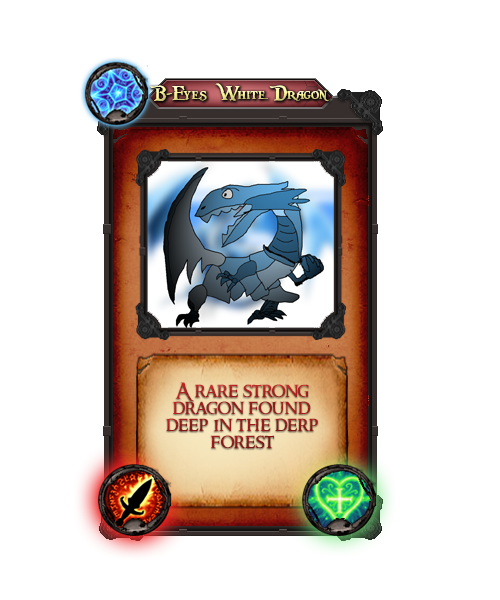
<style>
.page{position:relative;width:500px;height:600px;background:#ffffff}
.page>*{position:absolute;margin:0}
.t1{font:22px "PiecesofEight"}
.t2{font:20px/17px "RingbearerMedium";color:#9b1c1c}
</style>
<div class="page">
<p class="t1" style="left:150px;top:83px;width:179px;height:19px">B-Eyes White Dragon</p>
<p class="t2" style="left:165px;top:382px;width:153px;height:67px;text-align:center">A rare strong dragon found deep in the derp forest</p>
</div>
